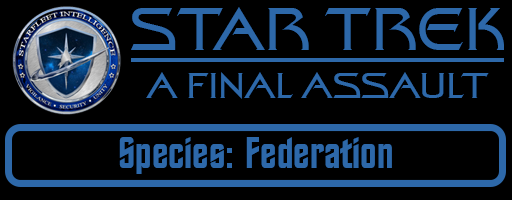
<style>
.page{position:relative;width:512px;height:200px;background:#000000}
.page>*{position:absolute;margin:0}
.t1{font:60px "StarTrekFilmBT-Regular";color:#2d68a9}
.t2{font:36px "StarTrekFilmBT-Regular";color:#2d68a9}
.t3{font:44px "StarTrekBT-Regular";color:#2d68a9}
</style>
<div class="page">
<p class="t1" style="left:131px;top:7px;width:373px;height:43px">STAR TREK</p>
<p class="t2" style="left:146px;top:72px;width:343px;height:27px">A FINAL ASSAULT</p>
<p class="t3" style="left:119px;top:137px;width:273px;height:37px">Species: Federation</p>
</div>
